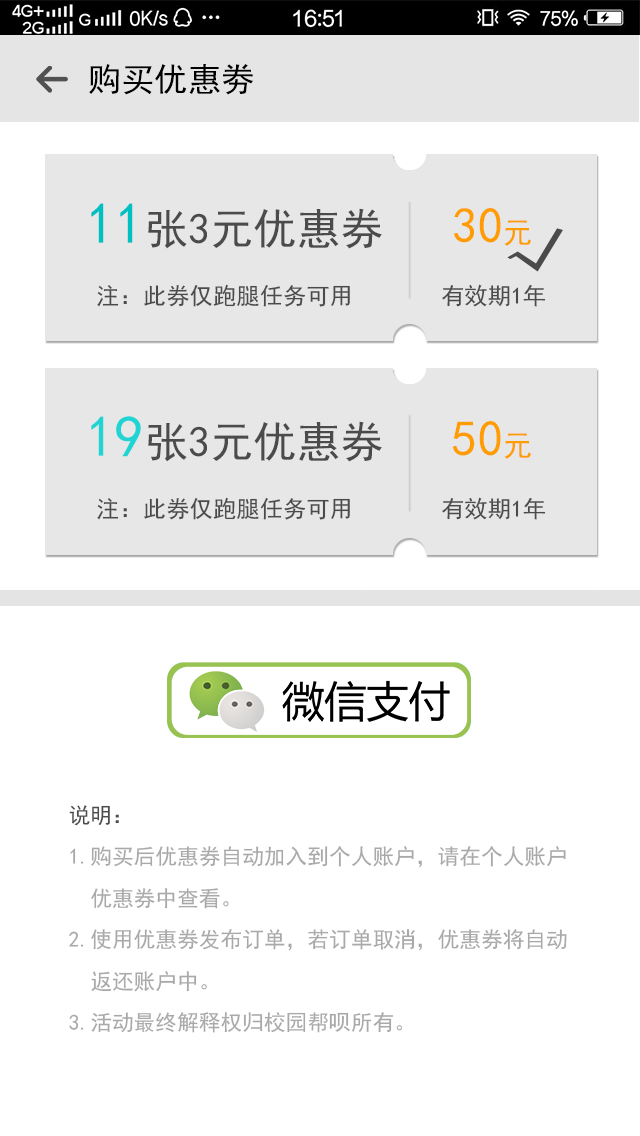
<style>
.page{position:relative;width:640px;height:1136px;background:#ffffff}
.page>*{position:absolute;margin:0}
.t1{font:33.3px "SimHei";letter-spacing:0.002em;color:#000000}
.t2{font:43.3px "SimHei";letter-spacing:0.002em;color:#4b4b4b}
.t3{font:58.3px "SimHei";letter-spacing:0.002em;color:#01c0c2}
.t4{font:50px "SimHei";letter-spacing:0.002em;color:#ff9c00}
.t5{font:30px "SimHei";letter-spacing:0.002em;color:#ff9c00}
.t6{font:23.3px "SimHei";letter-spacing:0.002em;color:#4b4b4b}
.t7{font:58.3px "SimHei";letter-spacing:0.002em;color:#21d4d4}
.t8{font:21.7px/41.5px "SimHei";letter-spacing:0.002em;color:#a9a9a9}
.t9{font:21.7px/41.5px "SimHei";letter-spacing:0.002em;color:#4b4b4b}
</style>
<div class="page">
<p class="t1" style="left:89px;top:64px;width:165px;height:31px">购买优惠劵</p>
<p class="t2" style="left:91px;top:203px;width:291px;height:46px"><span class="t3">11</span>张3元优惠券</p>
<p class="t4" style="left:454px;top:208px;width:77px;height:38px">30<span class="t5">元</span></p>
<p class="t6" style="left:97px;top:284px;width:253px;height:23px">注：此券仅跑腿任务可用</p>
<p class="t6" style="left:442px;top:284px;width:104px;height:23px">有效期1年</p>
<p class="t2" style="left:91px;top:416px;width:291px;height:46px"><span class="t7">19</span>张3元优惠券</p>
<p class="t4" style="left:452px;top:421px;width:79px;height:38px">50<span class="t5">元</span></p>
<p class="t6" style="left:97px;top:497px;width:253px;height:23px">注：此券仅跑腿任务可用</p>
<p class="t6" style="left:442px;top:497px;width:104px;height:23px">有效期1年</p>
<p class="t8" style="left:69px;top:805px;width:498px;height:228px"><span class="t9">说明：<br></span>1.购买后优惠券自动加入到个人账户，请在个人账户<br>  优惠券中查看。<br>2.使用优惠券发布订单，若订单取消，优惠券将自动<br>  返还账户中。<br>3.活动最终解释权归校园帮呗所有。</p>
</div>
